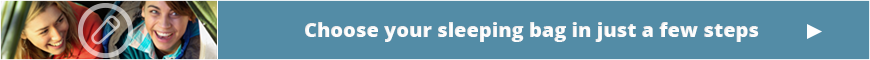
<style>
.page{position:relative;width:870px;height:60px;background:#538ca6}
.page>*{position:absolute;margin:0}
.t1{font:20px "OpenSans-Extrabold";color:#ffffff}
</style>
<div class="page">
<p class="t1" style="left:305px;top:22px;width:454px;height:20px">Choose your sleeping bag in just a few steps</p>
</div>
